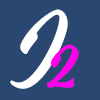
<style>
.page{position:relative;width:100px;height:100px;background:#294771}
.page>*{position:absolute;margin:0}
.t1{font:85.8px "EdsMarketMainScript";color:#ffffff}
.t2{font:58.7px "EdsMarketMainScript";color:#fe00e9}
</style>
<div class="page">
<p class="t1" style="left:10px;top:9px;width:58px;height:80px">I</p>
<p class="t2" style="left:47px;top:44px;width:32px;height:44px">2</p>
</div>
